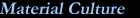
<style>
.page{position:relative;width:140px;height:18px;background:#000000}
.page>*{position:absolute;margin:0}
.t1{font:18px "Garamond-Bold";color:#99ccff;font-style:italic}
</style>
<div class="page">
<p class="t1" style="left:0px;top:2px;width:125px;height:13px">Material Culture</p>
</div>
